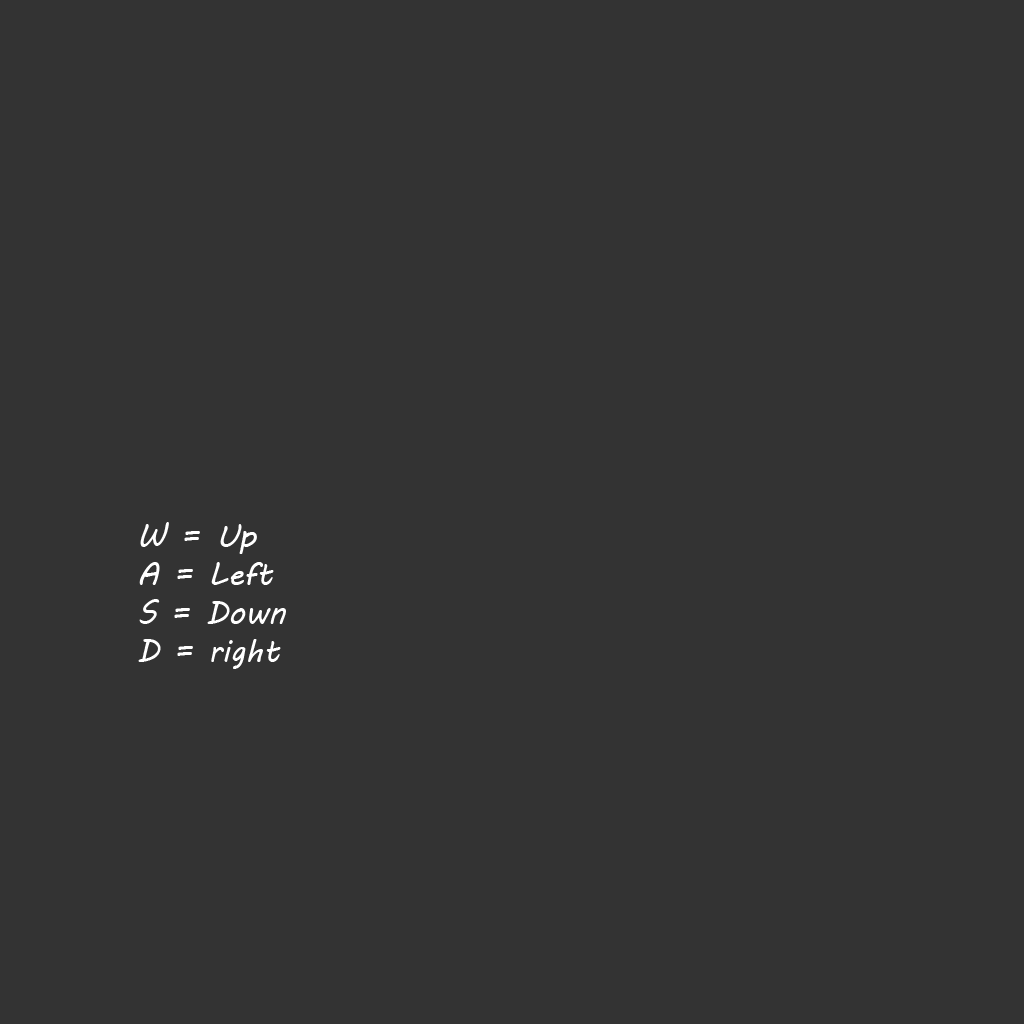
<style>
.page{position:relative;width:1024px;height:1024px;background:#333333}
.page>*{position:absolute;margin:0}
.t1{font:32px "MVBoli";color:#ffffff}
</style>
<div class="page">
<p class="t1" style="left:138px;top:522px;width:148px;height:147px">W = Up<br>A = Left<br>S = Down<br>D = right</p>
</div>
